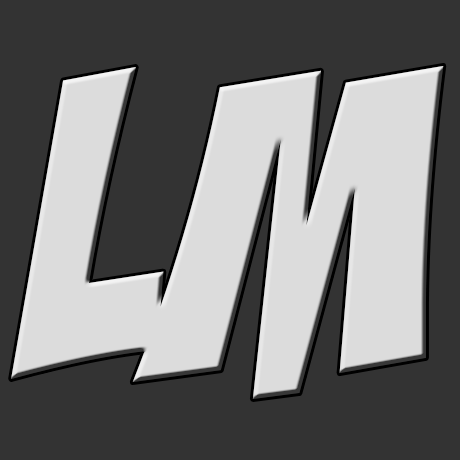
<style>
.page{position:relative;width:460px;height:460px;background:#333333}
.page>*{position:absolute;margin:0}
.t1{font:432.9px "BadaBoomBB";color:#dcdcdc}
</style>
<div class="page">
<p class="t1" style="left:11px;top:65px;width:433px;height:334px">LM</p>
</div>
